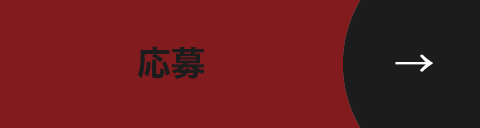
<style>
.page{position:relative;width:480px;height:128px;background:#821b1e}
.page>*{position:absolute;margin:0}
.t1{font:34px "HiraginoSans-W7";color:#1c1c1c}
.t2{font:40px "HiraginoSans-W6";color:#ffffff;font-weight:bold}
</style>
<div class="page">
<p class="t1" style="left:137px;top:46px;width:68px;height:33px">応募</p>
<p class="t2" style="left:395px;top:54px;width:38px;height:18px">→</p>
</div>
